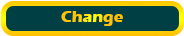
<style>
.page{position:relative;width:184px;height:36px;background:#004044}
.page>*{position:absolute;margin:0}
.t1{font:16px "ErasITC-Bold"}
</style>
<div class="page">
<p class="t1" style="left:61px;top:11px;width:62px;height:15px">Change</p>
</div>
